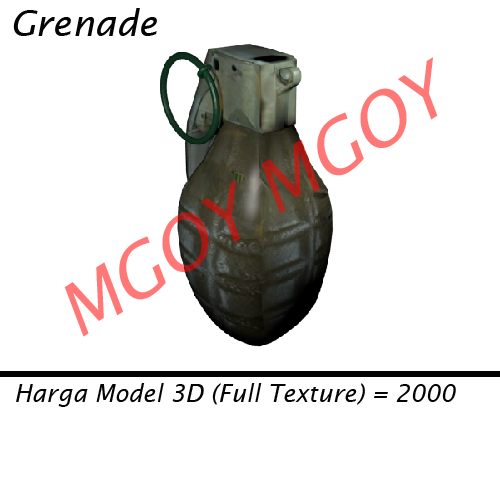
<style>
.page{position:relative;width:500px;height:500px;background:#ffffff}
.page>*{position:absolute;margin:0}
.t1{font:36px "LucidaSans-Italic";color:#040404}
.t2{font:24px "LucidaSans-Italic";color:#040404}
</style>
<div class="page">
<p class="t1" style="left:13px;top:8px;width:144px;height:28px">Grenade</p>
<p class="t2" style="left:16px;top:383px;width:440px;height:24px">Harga Model 3D (Full Texture) = 2000</p>
</div>
